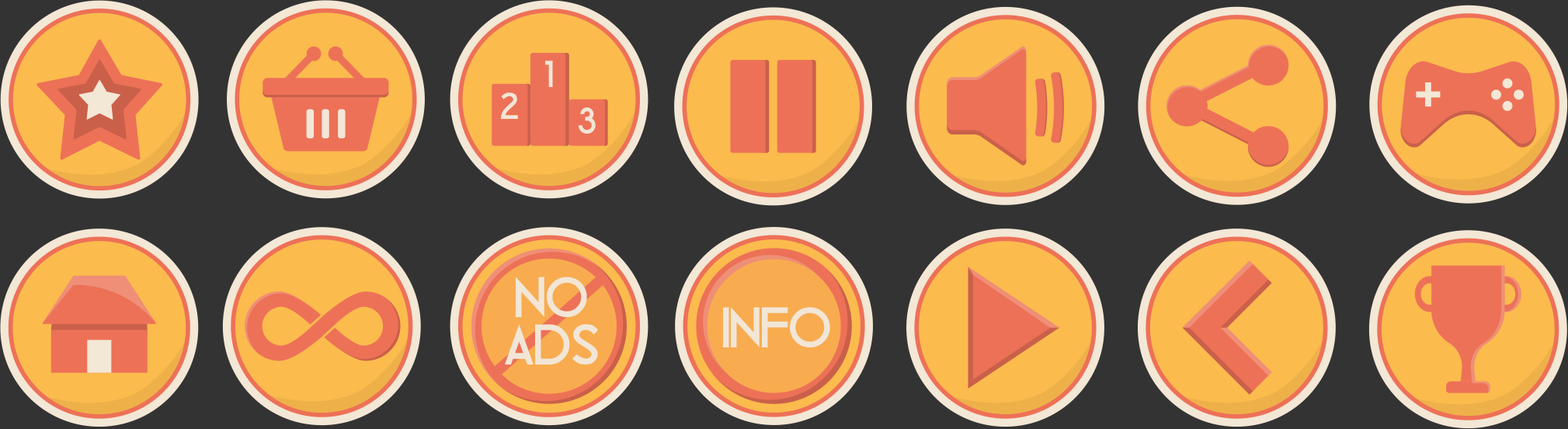
<style>
.page{position:relative;width:1568px;height:429px;background:#333333}
.page>*{position:absolute;margin:0}
.t1{font:38.2px "BlissfulThinking";color:#f3e7d6}
.t2{font:58.7px/47.8px "BlissfulThinking";letter-spacing:-0.01em;color:#f3e7d6}
.t3{font:58.7px "BlissfulThinking";letter-spacing:-0.01em;color:#f3e7d6}
</style>
<div class="page">
<p class="t1" style="left:545px;top:61px;width:8px;height:26px">1</p>
<p class="t1" style="left:501px;top:92px;width:17px;height:27px">2</p>
<p class="t1" style="left:579px;top:107px;width:17px;height:27px">3</p>
<p class="t2" style="left:505px;top:276px;width:94px;height:88px;text-align:center">NO<br>ADS</p>
<p class="t3" style="left:723px;top:307px;width:107px;height:40px">INFO</p>
</div>
